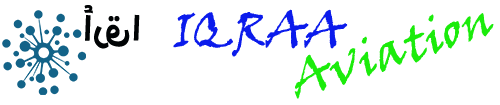
<style>
.page{position:relative;width:500px;height:105px;background:#ffffff}
.page>*{position:absolute;margin:0}
.t1{font:48.5px "MyriadArabic-Bold";color:#010405}
.t2{font:48.5px "VinerHandITC";color:#0b1bec}
.t3{font:48.5px "VinerHandITC";color:#1bec0b}
</style>
<div class="page">
<p class="t1" style="left:84px;top:5px;width:56px;height:44px;rotate:180deg">اقرأ</p>
<p class="t2" style="left:173px;top:9px;width:175px;height:48px">IQRAA</p>
<p class="t3" style="left:294px;top:13px;width:200px;height:86px;rotate:-18deg">Aviation</p>
</div>
